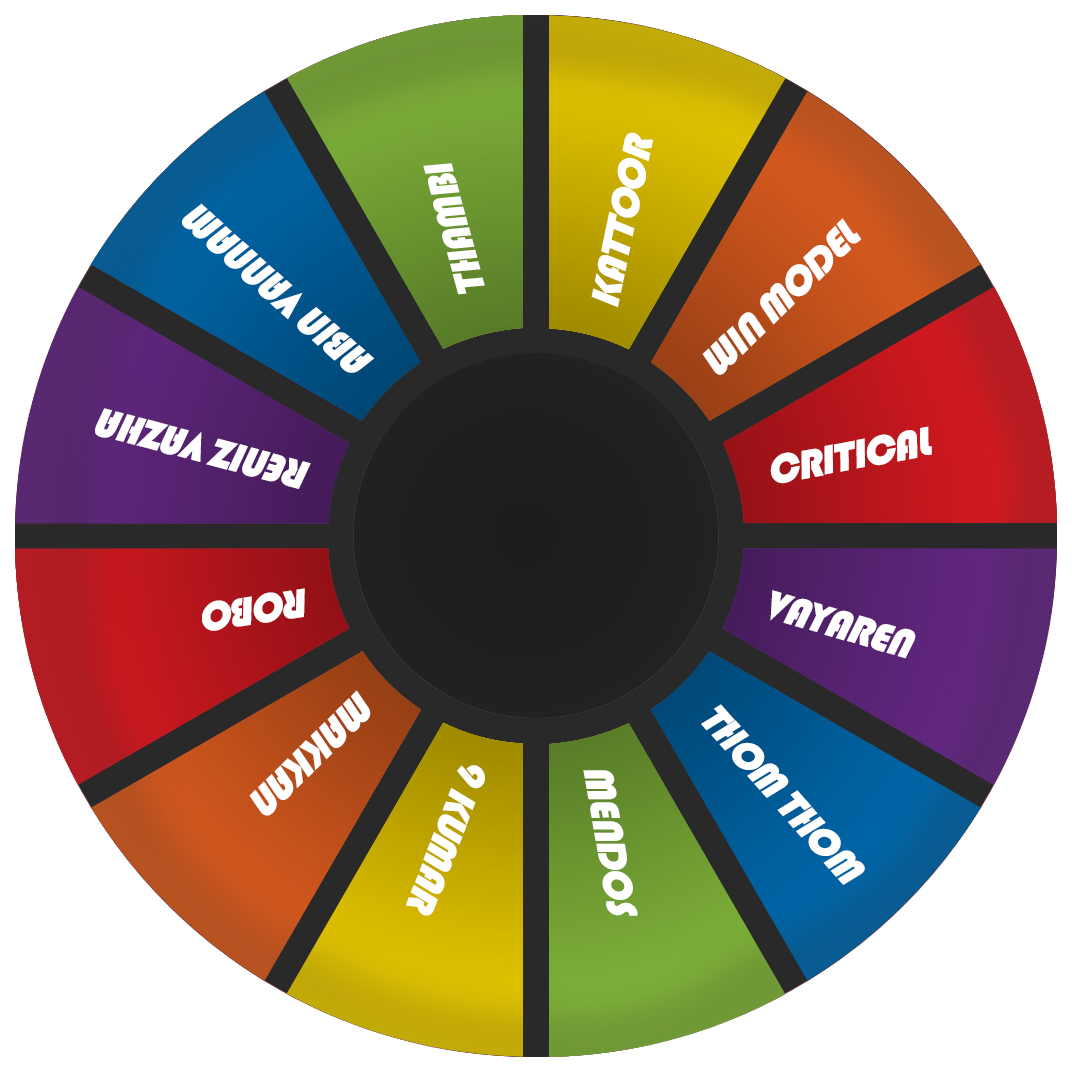
<style>
.page{position:relative;width:1072px;height:1072px;background:#ffffff}
.page>*{position:absolute;margin:0}
.t1{font:42px "Bauhaus93";letter-spacing:-0.04em;color:#ffffff;text-transform:uppercase;font-style:italic}
</style>
<div class="page">
<p class="t1" style="left:591px;top:132px;width:63px;height:176px;rotate:-78deg">kattoor</p>
<p class="t1" style="left:423px;top:163px;width:62px;height:132px;rotate:-105deg">thambi</p>
<p class="t1" style="left:182px;top:203px;width:193px;height:170px;rotate:-138deg">abin vannam</p>
<p class="t1" style="left:702px;top:218px;width:160px;height:157px;rotate:-44deg">win model</p>
<p class="t1" style="left:95px;top:408px;width:216px;height:81px;rotate:-165deg">reniz vazha</p>
<p class="t1" style="left:770px;top:426px;width:162px;height:58px;rotate:-11deg">CrItical</p>
<p class="t1" style="left:202px;top:588px;width:103px;height:43px;rotate:171deg">robo</p>
<p class="t1" style="left:770px;top:590px;width:146px;height:69px;rotate:16deg">vayaren</p>
<p class="t1" style="left:249px;top:690px;width:122px;height:126px;rotate:136deg">makkan</p>
<p class="t1" style="left:701px;top:704px;width:164px;height:181px;rotate:49deg">thom thom</p>
<p class="t1" style="left:405px;top:765px;width:80px;height:151px;rotate:111deg">9 kumar</p>
<p class="t1" style="left:583px;top:770px;width:55px;height:146px;rotate:80deg">mendos</p>
</div>
